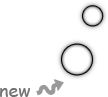
<style>
.page{position:relative;width:108px;height:97px;background:#ffffff}
.page>*{position:absolute;margin:0}
.t1{font:18px "ComicSansMS";color:#737373}
</style>
<div class="page">
<p class="t1" style="left:0px;top:88px;width:31px;height:9px">new</p>
</div>
